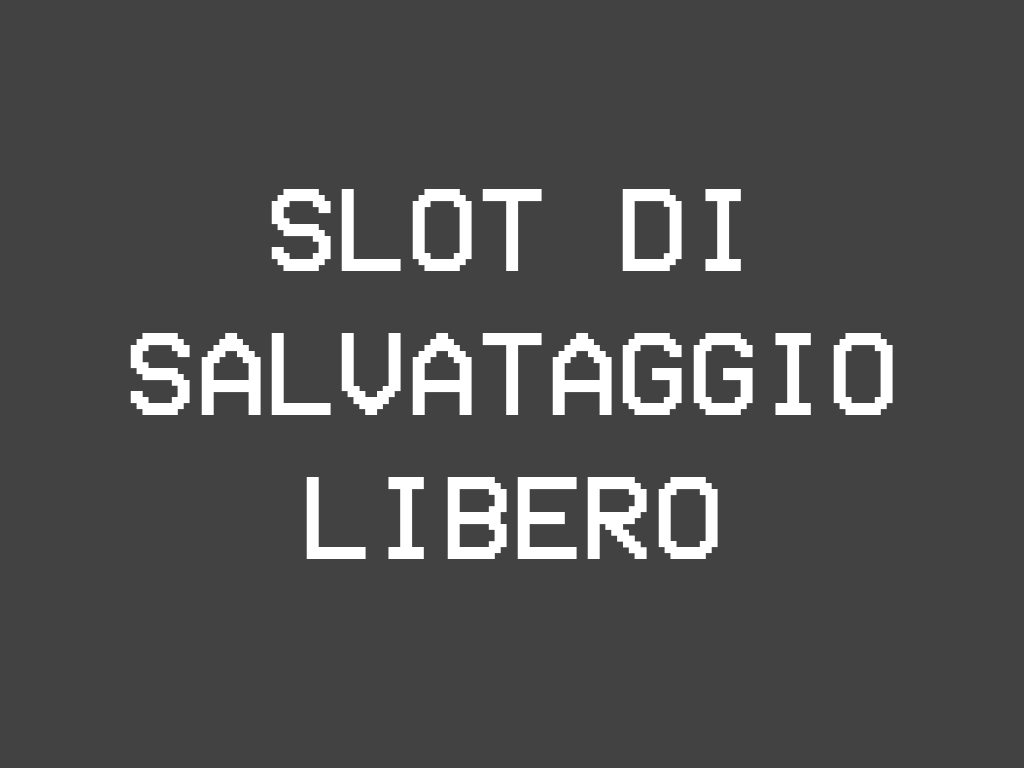
<style>
.page{position:relative;width:1024px;height:768px;background:#424242}
.page>*{position:absolute;margin:0}
.t1{font:120px "VCROSDMono";color:#ffffff}
</style>
<div class="page">
<p class="t1" style="left:130px;top:189px;width:763px;height:370px;text-align:center">SLOT DI <br>SALVATAGGIO LIBERO</p>
</div>
